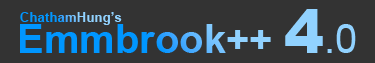
<style>
.page{position:relative;width:375px;height:63px;background:#333333}
.page>*{position:absolute;margin:0}
.t1{font:40px "Arial-BoldMT"}
.t2{font:60px "Arial-Black"}
.t3{font:40px "ArialMT"}
.t4{font:13.3px "Arial-BoldMT"}
</style>
<div class="page">
<p class="t1" style="left:20px;top:9px;width:336px;height:44px">Emmbrook++ <span class="t2">4</span><span class="t3">.0</span></p>
<p class="t4" style="left:20px;top:12px;width:102px;height:13px">ChathamHung’s</p>
</div>
